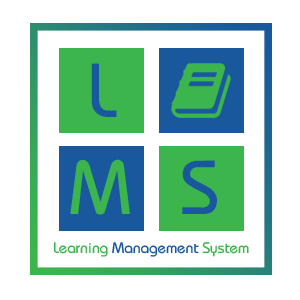
<style>
.page{position:relative;width:300px;height:300px;background:#ffffff}
.page>*{position:absolute;margin:0}
.t1{font:76.2px "Bauhaus";color:#19589d}
.t2{font:76.2px "Bauhaus";color:#3cb54c}
.t3{font:15.2px "Bauhaus";color:#19589d}
.t4{font:15.2px "Bauhaus";color:#3cb54c}
</style>
<div class="page">
<p class="t1" style="left:91px;top:63px;width:26px;height:54px">L</p>
<p class="t2" style="left:70px;top:159px;width:60px;height:56px">M</p>
<p class="t1" style="left:182px;top:160px;width:35px;height:54px">S</p>
<p class="t3" style="left:53px;top:242px;width:196px;height:15px"><span class="t4">Learning </span>Management <span class="t4">System</span></p>
</div>
